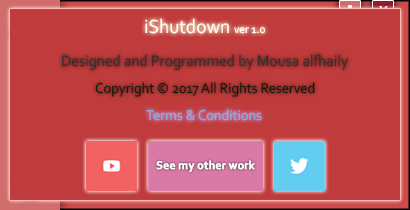
<style>
.page{position:relative;width:410px;height:210px;background:#c03b3b}
.page>*{position:absolute;margin:0}
.t1{font:20px "Corbel";color:#ffffff;scale:0.96 1}
.t2{font:12px "Corbel";color:#ffffff;scale:0.96 1}
.t3{font:16px "Corbel";color:#30322f;scale:0.96 1}
.t4{font:15px "Corbel";color:#111b0b;scale:0.96 1}
.t5{font:15px "Corbel";color:#85afd1;scale:0.96 1}
.t6{font:12px "Corbel-Bold";color:#ffffff;font-weight:bold;scale:0.96 1}
</style>
<div class="page">
<p class="t1" style="left:145px;top:18px;width:121px;height:16px">iShutdown <span class="t2">ver 1.0</span></p>
<p class="t3" style="left:62px;top:54px;width:287px;height:16px">Designed and Programmed by Mousa alfhaily</p>
<p class="t4" style="left:95px;top:82px;width:220px;height:15px">Copyright © 2017 All Rights Reserved</p>
<p class="t5" style="left:146px;top:109px;width:116px;height:12px">Terms &amp; Conditions</p>
<p class="t6" style="left:156px;top:160px;width:99px;height:13px">See my other work</p>
</div>
